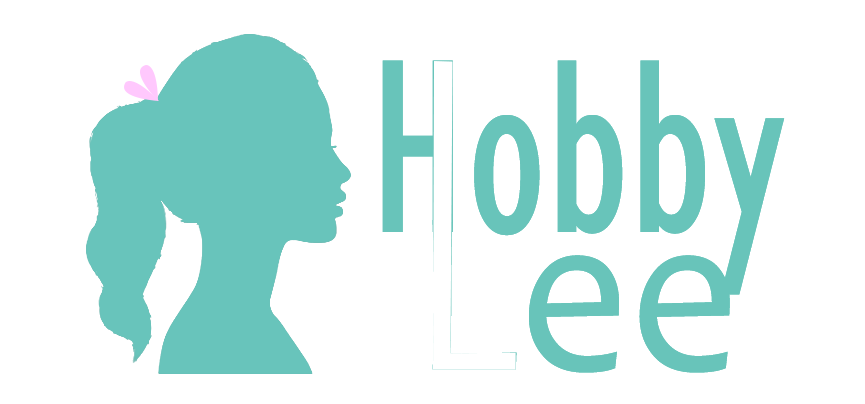
<style>
.page{position:relative;width:865px;height:404px;background:#ffffff}
.page>*{position:absolute;margin:0}
.t1{font:256.3px "GillSansMT-Condensed";color:#68c4ba;scale:0.91 1}
.t2{font:234.8px "Candara";color:#68c4ba;scale:0.92 1}
</style>
<div class="page">
<p class="t1" style="left:382px;top:60px;width:403px;height:235px">Hobby</p>
<p class="t2" style="left:432px;top:220px;width:298px;height:153px">Lee</p>
</div>
